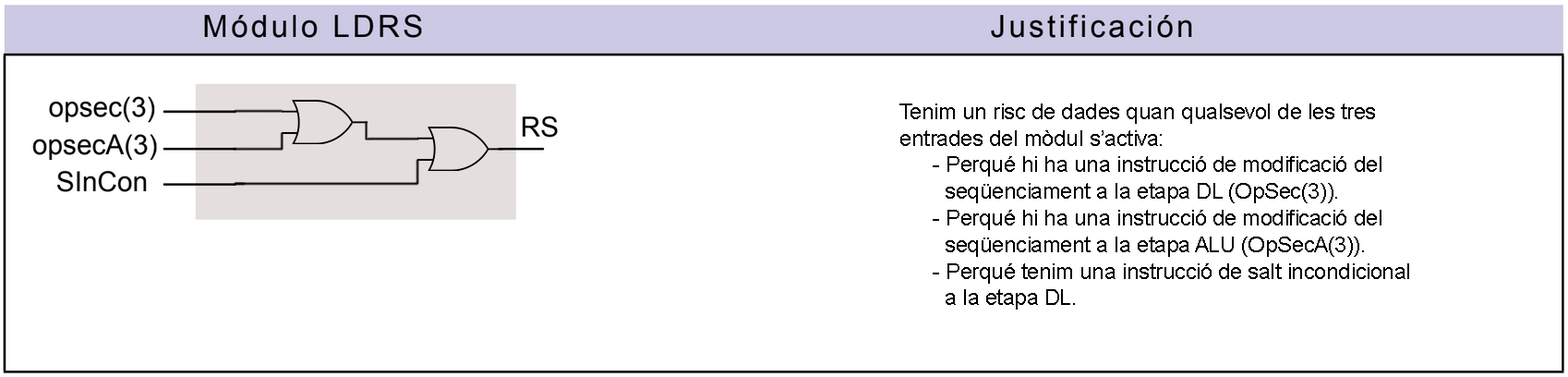
<style>
.page{position:relative;width:1568px;height:377px;background:#ffffff}
.page>*{position:absolute;margin:0}
.t1{font:22.2px "ArialMT";letter-spacing:-0.02em;color:#000000}
</style>
<div class="page">
<p class="t1" style="left:899px;top:103px;width:510px;height:206px">Tenim un risc de dades quan qualsevol de les tres<br>entrades del mòdul s’activa:<br> - Perqué hi ha una instrucció de modificació del<br>   seqüenciament a la etapa DL (OpSec(3)).<br> - Perqué hi ha una instrucció de modificació del<br>   seqüenciament a la etapa ALU (OpSecA(3)).<br> - Perqué tenim una instrucció de salt incondicional<br>   a la etapa DL.</p>
</div>
